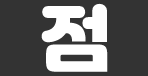
<style>
.page{position:relative;width:148px;height:76px;background:#333333}
.page>*{position:absolute;margin:0}
.t1{font:72px "Jalnan";letter-spacing:0.05em;color:#ffffff;text-transform:uppercase}
</style>
<div class="page">
<p class="t1" style="left:41px;top:3px;width:67px;height:69px">점</p>
</div>
